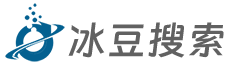
<style>
.page{position:relative;width:234px;height:67px;background:#ffffff}
.page>*{position:absolute;margin:0}
.t1{font:40px "DingTalk-JinBuTi";color:#616161}
</style>
<div class="page">
<p class="t1" style="left:68px;top:22px;width:156px;height:36px">冰豆搜索</p>
</div>
